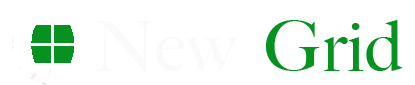
<style>
.page{position:relative;width:415px;height:85px;background:#ffffff}
.page>*{position:absolute;margin:0}
.t1{font:70px "BigCaslon-Medium";color:#059220}
.t2{font:70px "BigCaslon-Medium";color:#f9faf9}
.t3{font:70px "BigCaslon-Medium";color:#ffffff}
</style>
<div class="page">
<p class="t1" style="left:96px;top:20px;width:307px;height:51px"><span class="t2">New</span><span class="t3">s</span>Grid</p>
</div>
